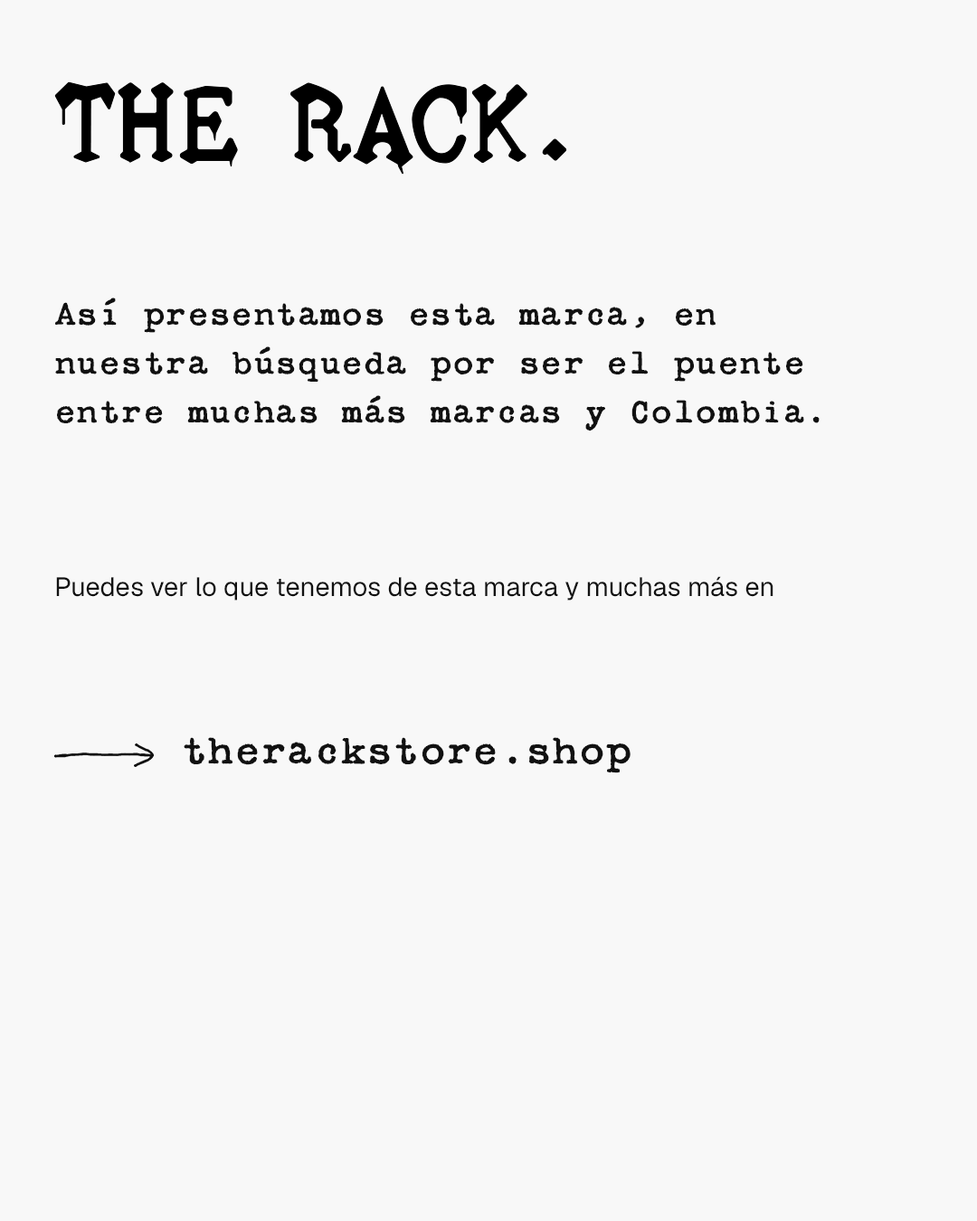
<style>
.page{position:relative;width:977px;height:1221px;background:#f8f8f8}
.page>*{position:absolute;margin:0}
.t1{font:37.7px/49px "SecretServiceTypewriterRR-Regular";color:#111111}
.t2{font:26.4px "Geist-Regular";color:#111111}
.t3{font:45.2px "SecretServiceTypewriterRR-Regular";color:#111111}
</style>
<div class="page">
<p class="t1" style="left:55px;top:298px;width:764px;height:133px">Así presentamos esta marca, en nuestra búsqueda por ser el puente entre muchas más marcas y Colombia.</p>
<p class="t2" style="left:56px;top:576px;width:717px;height:24px">Puedes ver lo que tenemos de esta marca y muchas más en</p>
<p class="t3" style="left:184px;top:737px;width:446px;height:36px">therackstore.shop</p>
</div>
